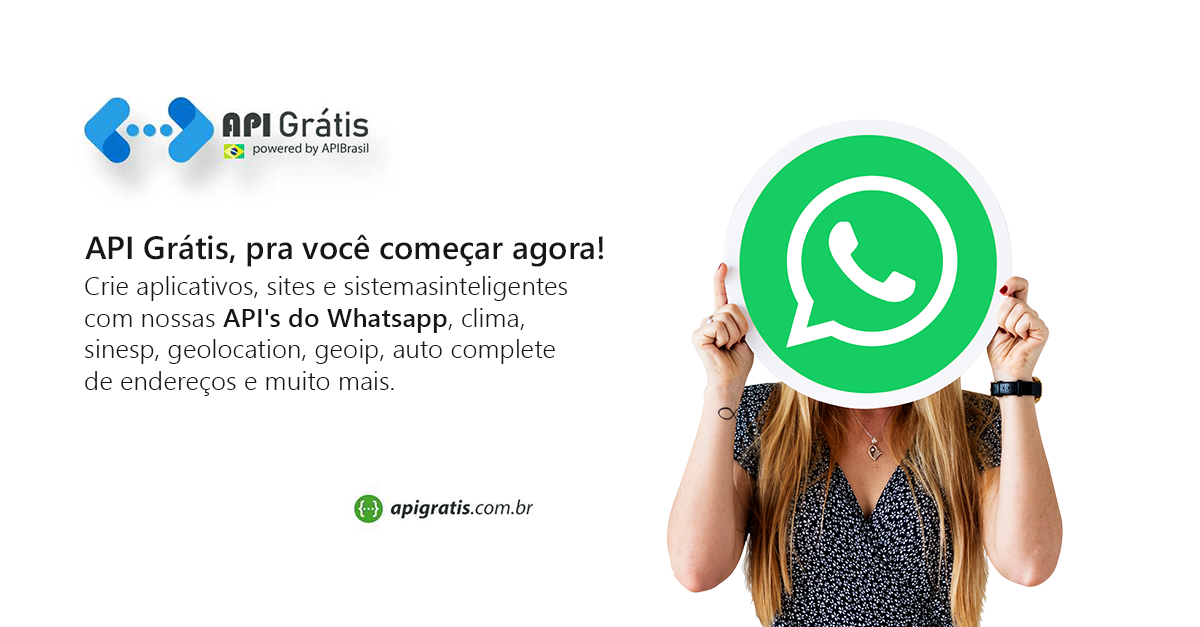
<style>
.page{position:relative;width:1200px;height:627px;background:#ffffff}
.page>*{position:absolute;margin:0}
.t1{font:32.3px "SegoeUI-Semibold";color:#161619}
.t2{font:26.4px "SegoeUI-Semilight";color:#161619}
.t3{font:26.4px "SegoeUI-Semibold";color:#161619}
</style>
<div class="page">
<p class="t1" style="left:85px;top:234px;width:519px;height:33px">API Grátis, pra você começar agora!</p>
<p class="t2" style="left:85px;top:276px;width:482px;height:120px">Crie aplicativos, sites e sistemasinteligentes <br>com nossas <span class="t3">API's do Whatsapp</span>, clima, <br>sinesp, geolocation, geoip, auto complete <br>de endereços e muito mais.</p>
</div>
